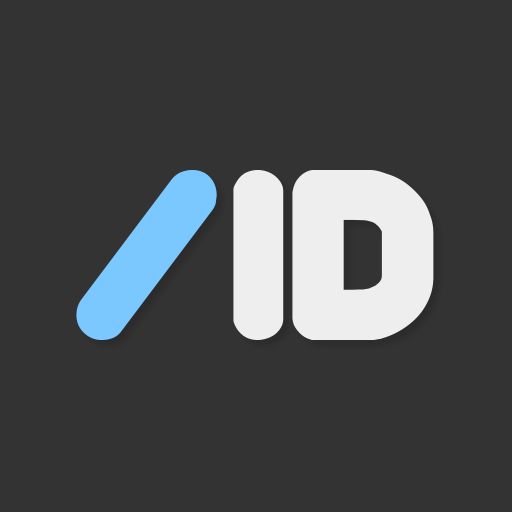
<style>
.page{position:relative;width:512px;height:512px;background:#333333}
.page>*{position:absolute;margin:0}
.t1{font:245.1px "CorpulentCapsBRK";color:#7ac8ff}
.t2{font:245.1px "CorpulentCapsBRK";color:#eeeeee}
</style>
<div class="page">
<p class="t1" style="left:76px;top:170px;width:141px;height:170px">/</p>
<p class="t2" style="left:233px;top:170px;width:201px;height:170px">id</p>
</div>
